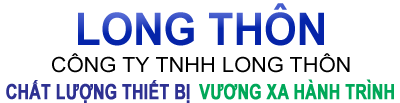
<style>
.page{position:relative;width:400px;height:103px;background:#ffffff}
.page>*{position:absolute;margin:0}
.t1{font:45px "Arial-BoldMT";scale:0.93 1}
.t2{font:21px "ArialNarrow";color:#000000;scale:1.27 1}
.t3{font:21px "Arial-BoldMT";color:#2e3192;font-weight:bold;scale:0.75 1}
.t4{font:21px "Arial-BoldMT";color:#00a859;font-weight:bold;scale:0.75 1}
</style>
<div class="page">
<p class="t1" style="left:78px;top:3px;width:246px;height:43px">LONG THÔN</p>
<p class="t2" style="left:52px;top:53px;width:298px;height:20px">CÔNG TY TNHH LONG THÔN</p>
<p class="t3" style="left:6px;top:80px;width:184px;height:24px">CHẤT LƯỢNG THIẾT BỊ</p>
<p class="t4" style="left:199px;top:79px;width:195px;height:21px">VƯƠNG XA HÀNH TRÌNH</p>
</div>
